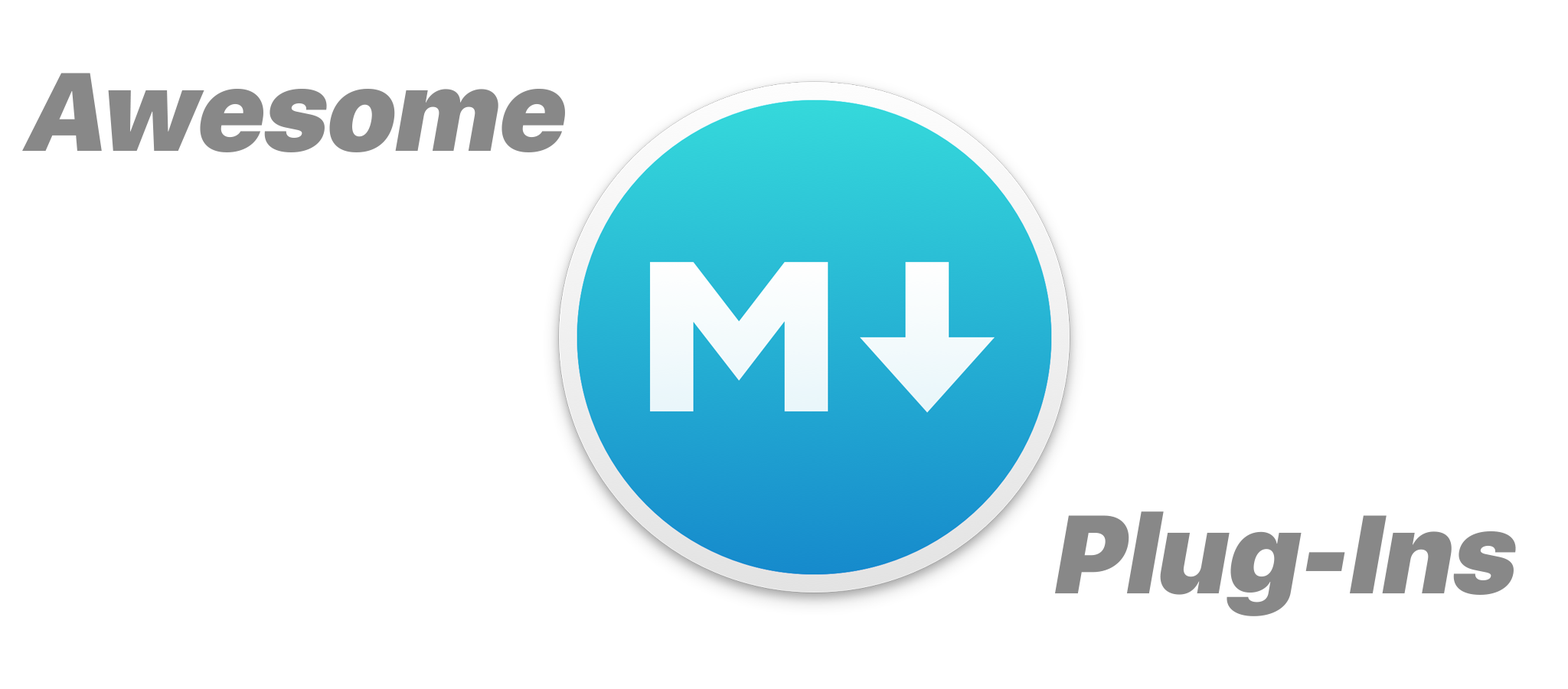
<style>
.page{position:relative;width:1568px;height:689px;background:#ffffff}
.page>*{position:absolute;margin:0}
.t1{font:110.2px "SFUIDisplay-Black";color:#888888;font-style:italic}
</style>
<div class="page">
<p class="t1" style="left:22px;top:73px;width:543px;height:79px">Awesome</p>
<p class="t1" style="left:1055px;top:511px;width:461px;height:105px">Plug-Ins</p>
</div>
